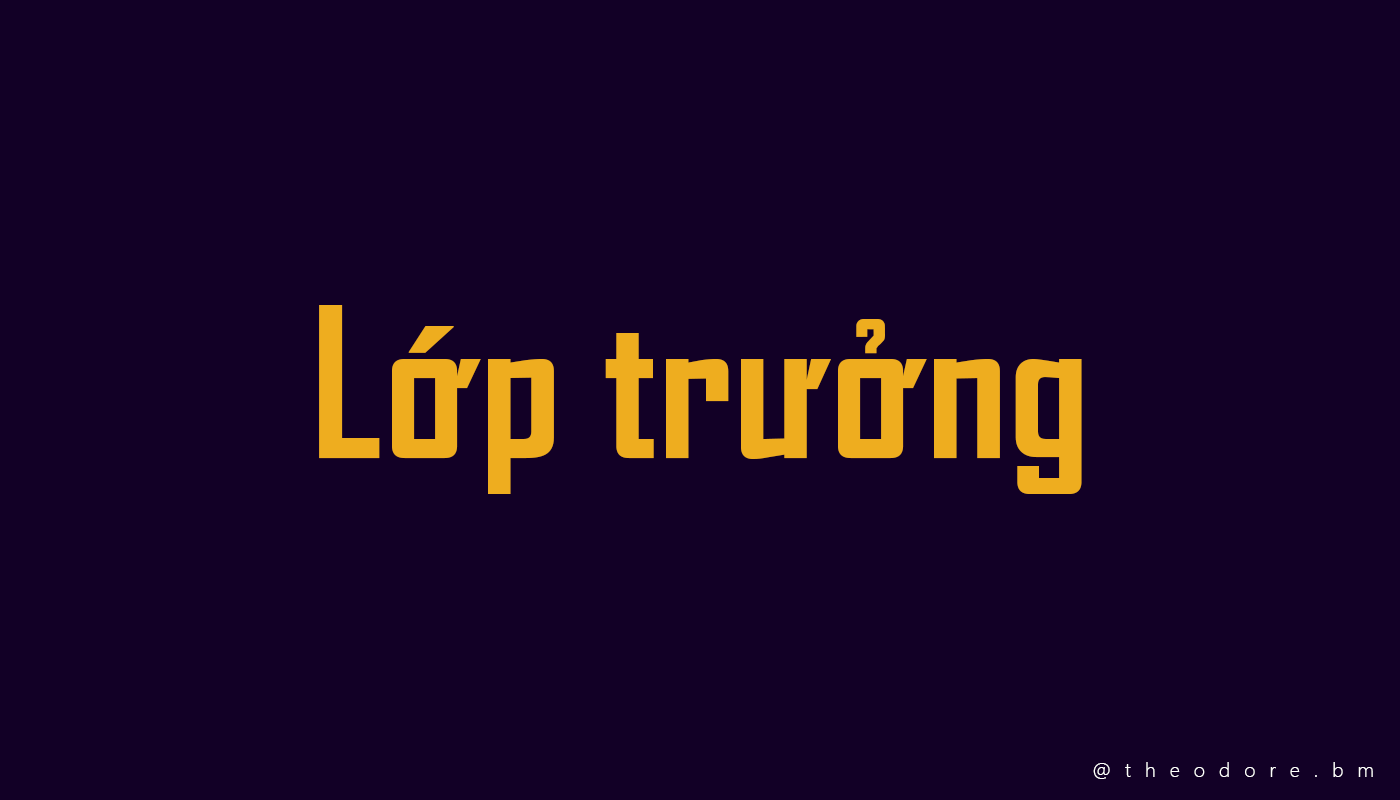
<style>
.page{position:relative;width:1400px;height:800px;background:#120026}
.page>*{position:absolute;margin:0}
.t1{font:200px "SVN-AgencyFBbold";color:#eead1f}
.t2{font:20px "SegoeUI-Light";letter-spacing:0.7em;color:#ffffff}
</style>
<div class="page">
<p class="t1" style="left:319px;top:305px;width:763px;height:189px">Lớp trưởng</p>
<p class="t2" style="left:1093px;top:762px;width:280px;height:17px">@theodore.bm</p>
</div>
